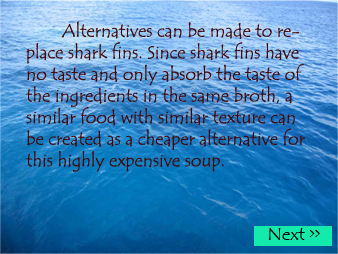
<style>
.page{position:relative;width:338px;height:254px}
.page>*{position:absolute;margin:0}
.t1{font:18px "TempusSansITC";color:#460707}
</style>
<div class="page">
<p class="t1" style="left:25px;top:21px;width:280px;height:151px">Alternatives can be made to replace shark fins. Since shark fins have no taste and only absorb the taste of the ingredients in the same broth, a similar food with similar texture can be created as a cheaper alternative for this highly expensive soup.</p>
</div>
